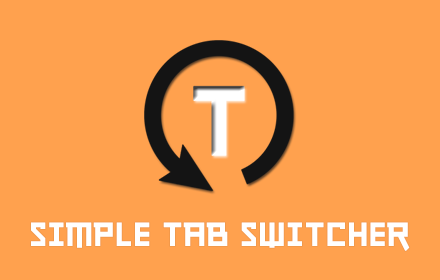
<style>
.page{position:relative;width:440px;height:280px;background:#ffa14e}
.page>*{position:absolute;margin:0}
.t1{font:50px "journey";color:#ffffff}
</style>
<div class="page">
<p class="t1" style="left:31px;top:222px;width:379px;height:29px">SIMPLE Tab Switcher</p>
</div>
